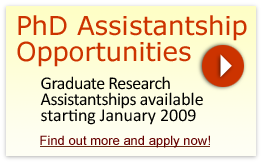
<style>
.page{position:relative;width:263px;height:163px}
.page>*{position:absolute;margin:0}
.t1{font:26px/26px "Verdana";color:#cc3300}
.t2{font:18px/16px "Calibri";letter-spacing:-0.025em;color:#000000}
.t3{font:18px/16px "Calibri";color:#000000}
.t4{font:13px "ArialMT";color:#660000}
</style>
<div class="page">
<p class="t1" style="left:17px;top:15px;width:230px;height:52px">PhD Assistantship<br>Opportunities</p>
<p class="t2" style="left:40px;top:76px;width:163px;height:49px">Graduate Research<br>Assistantships <span class="t3">available <br>starting January 2009</span></p>
<p class="t4" style="left:40px;top:135px;width:170px;height:13px">Find out more and apply now!</p>
</div>
